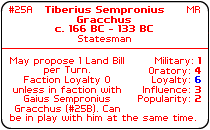
<style>
.page{position:relative;width:210px;height:130px;background:#ffffff}
.page>*{position:absolute;margin:0}
.t1{font:8px "PFTempestaSeven";color:#ff0000}
.t2{font:8px "PFTempestaSeven-Bold";color:#ff0000}
.t3{font:8px "PFTempestaSeven";color:#fe0000}
.t4{font:8px "PFTempestaSeven-Bold";color:#0000ff}
</style>
<div class="page">
<p class="t1" style="left:9px;top:6px;width:23px;height:7px">#25A</p>
<p class="t2" style="left:45px;top:6px;width:119px;height:26px;text-align:center">Tiberius Sempronius<br>Gracchus<br>c. 166 BC - 133 BC</p>
<p class="t1" style="left:187px;top:6px;width:13px;height:7px">MR</p>
<p class="t3" style="left:78px;top:35px;width:53px;height:7px">Statesman</p>
<p class="t1" style="left:10px;top:57px;width:114px;height:56px;text-align:center">May propose 1 Land Bill per Turn.<br>Faction Loyalty 0 unless in faction with Gaius Sempronius Gracchus (#25B). Can</p>
<p class="t1" style="left:138px;top:57px;width:63px;height:47px;text-align:right">Military: <span class="t2">1<br></span>Oratory: <span class="t2">4<br></span>Loyalty: <span class="t4">6<br></span>Influence: <span class="t2">3<br></span>Popularity: <span class="t2">2</span></p>
<p class="t1" style="left:10px;top:114px;width:186px;height:9px">be in play with him at the same time.</p>
</div>
